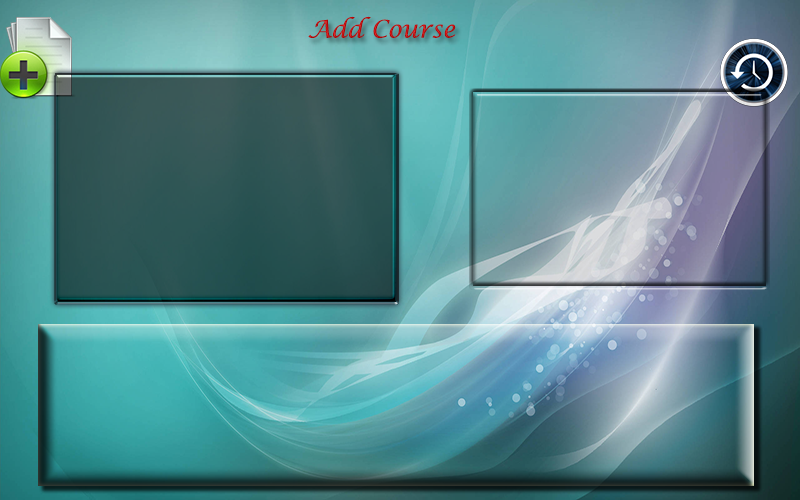
<style>
.page{position:relative;width:800px;height:500px}
.page>*{position:absolute;margin:0}
.t1{font:24px "LucidaCalligraphy-Italic";color:#be1111}
</style>
<div class="page">
<p class="t1" style="left:308px;top:16px;width:148px;height:22px">Add Course</p>
</div>
